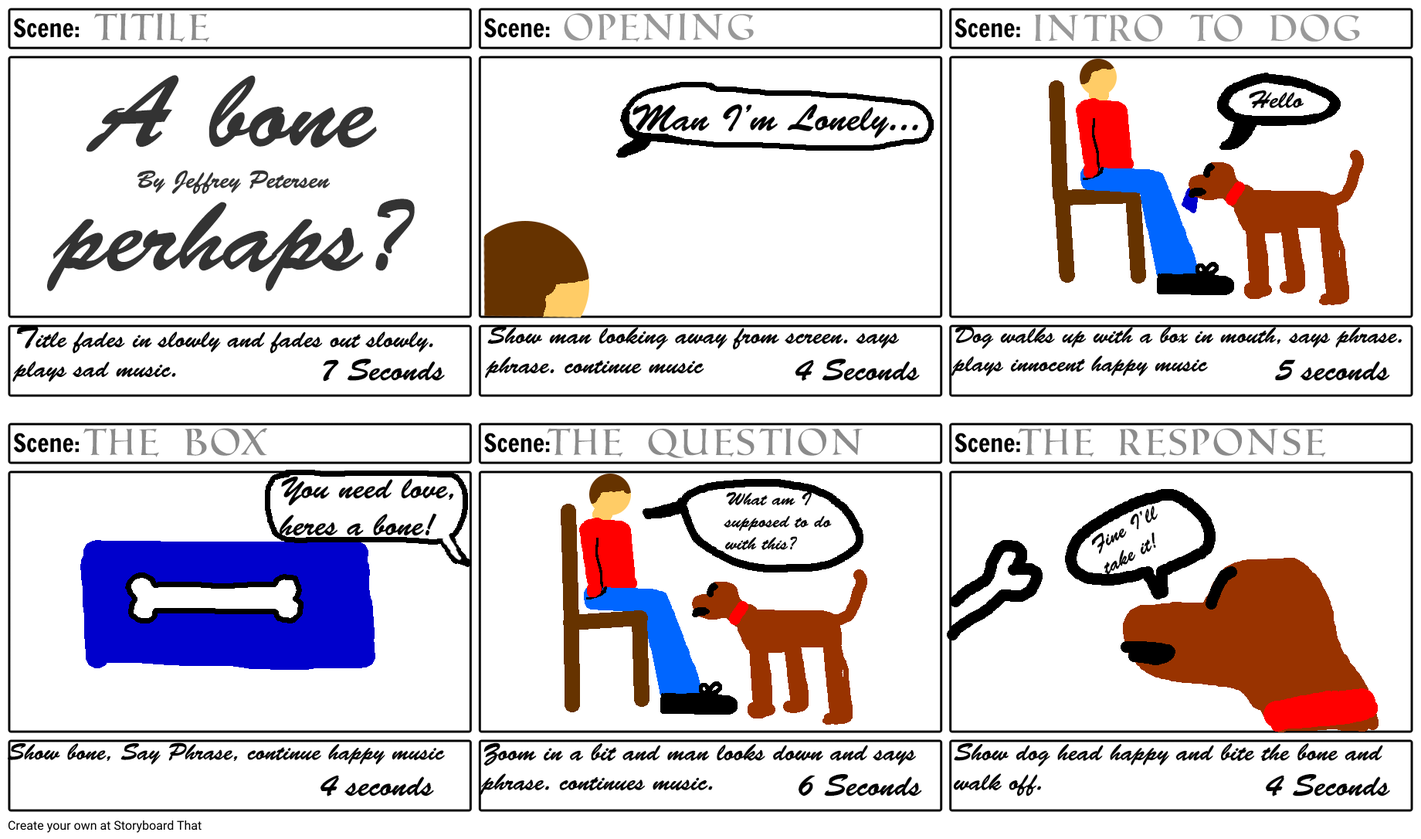
<style>
.page{position:relative;width:1421px;height:839px;background:#ffffff}
.page>*{position:absolute;margin:0}
.t1{font:37.1px "RomanSD";color:#8b8b8b}
.t2{font:37.1px "RomanSD";color:#999999}
.t3{font:103px "BrushScriptStd";color:#333333}
.t4{font:24.7px "BrushScriptStd";color:#000000}
.t5{font:37.1px "BrushScriptStd";color:#000000}
.t6{font:24.7px "BrushScriptStd";color:#333333}
.t7{font:30.9px "BrushScriptStd";color:#000000}
.t8{font:23.7px "BrushScriptStd";color:#000000}
.t9{font:18.5px "BrushScriptStd";color:#000000}
.t10{font:20.6px "BrushScriptStd";color:#000000}
</style>
<div class="page">
<p class="t1" style="left:94px;top:13px;width:115px;height:29px">Titile</p>
<p class="t2" style="left:564px;top:13px;width:190px;height:29px">opening</p>
<p class="t2" style="left:1035px;top:14px;width:325px;height:28px">Intro to DOG</p>
<p class="t3" style="left:47px;top:75px;width:368px;height:216px;text-align:center">A bone<br>perhaps?</p>
<p class="t4" style="left:1249px;top:90px;width:55px;height:19px">Hello</p>
<p class="t5" style="left:633px;top:104px;width:285px;height:34px">Man I’m Lonely...</p>
<p class="t6" style="left:137px;top:170px;width:194px;height:24px">By Jeffrey Petersen</p>
<p class="t4" style="left:12px;top:325px;width:421px;height:57px"><span class="t7">T</span>itle fades in slowly and fades out slowly. plays sad music.</p>
<p class="t4" style="left:485px;top:326px;width:414px;height:53px">Show man looking away from screen. says phrase. continue music</p>
<p class="t8" style="left:952px;top:326px;width:450px;height:50px">Dog walks up with a box in mouth, says phrase. plays innocent happy music</p>
<p class="t7" style="left:323px;top:358px;width:122px;height:24px">7 Seconds</p>
<p class="t7" style="left:795px;top:358px;width:125px;height:23px">4 Seconds</p>
<p class="t7" style="left:1275px;top:359px;width:115px;height:22px">5 seconds</p>
<p class="t1" style="left:83px;top:428px;width:185px;height:29px">The box</p>
<p class="t1" style="left:547px;top:428px;width:316px;height:30px">The Question</p>
<p class="t1" style="left:1018px;top:428px;width:308px;height:29px">The Response</p>
<p class="t7" style="left:280px;top:476px;width:174px;height:60px">You need love, heres a bone!</p>
<p class="t9" style="left:724px;top:491px;width:108px;height:59px">What am I supposed to do with this?</p>
<p class="t10" style="left:1092px;top:505px;width:66px;height:70px;rotate:-29deg">Fine I’ll take it!</p>
<p class="t8" style="left:8px;top:742px;width:437px;height:23px">Show bone, Say Phrase, continue happy music</p>
<p class="t4" style="left:480px;top:742px;width:436px;height:53px">Zoom in a bit and man looks down and says phrase. continues music.</p>
<p class="t4" style="left:953px;top:742px;width:431px;height:54px">Show dog head happy and bite the bone and walk off.</p>
<p class="t7" style="left:321px;top:775px;width:113px;height:21px">4 seconds</p>
<p class="t7" style="left:799px;top:774px;width:123px;height:22px">6 Seconds</p>
<p class="t7" style="left:1266px;top:774px;width:124px;height:22px">4 Seconds</p>
</div>
